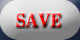
<style>
.page{position:relative;width:80px;height:40px}
.page>*{position:absolute;margin:0}
.t1{font:18px "MyungjoXB-HM"}
</style>
<div class="page">
<p class="t1" style="left:16px;top:13px;width:45px;height:14px">SAVE</p>
</div>
